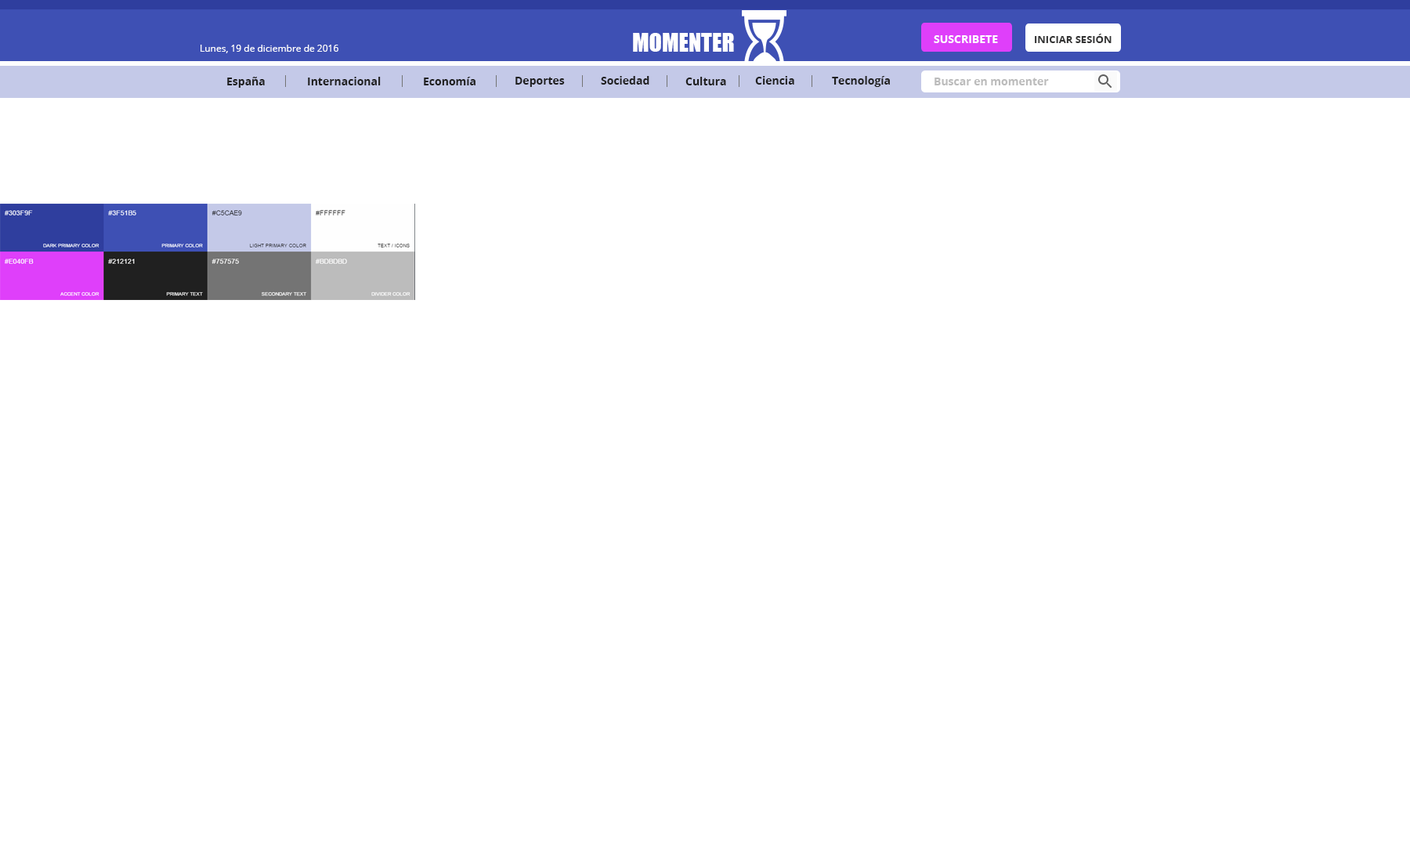
<style>
.page{position:relative;width:1410px;height:846px;background:#ffffff}
.page>*{position:absolute;margin:0}
.t1{font:23.5px "Impact";color:#ffffff}
.t2{font:11px "OpenSans-Bold";color:#ffffff}
.t3{font:10.2px "OpenSans-Bold";color:#333333}
.t4{font:9.4px "OpenSans";color:#ffffff}
.t5{font:11px "OpenSans-Bold";color:#202020}
.t6{font:11px "OpenSans-Bold";color:#bcbcbc}
</style>
<div class="page">
<p class="t1" style="left:633px;top:33px;width:101px;height:19px">MOMENTER</p>
<p class="t2" style="left:934px;top:35px;width:64px;height:8px">SUSCRIBETE</p>
<p class="t3" style="left:1035px;top:34px;width:76px;height:9px">INICIAR SESIÓN</p>
<p class="t4" style="left:200px;top:45px;width:138px;height:8px">Lunes, 19 de diciembre de 2016</p>
<p class="t5" style="left:227px;top:77px;width:38px;height:11px">España</p>
<p class="t5" style="left:308px;top:77px;width:73px;height:8px">Internacional</p>
<p class="t5" style="left:424px;top:77px;width:51px;height:8px">Economía</p>
<p class="t5" style="left:515px;top:77px;width:50px;height:10px">Deportes</p>
<p class="t5" style="left:601px;top:76px;width:48px;height:9px">Sociedad</p>
<p class="t5" style="left:685px;top:77px;width:41px;height:8px">Cultura</p>
<p class="t5" style="left:755px;top:76px;width:39px;height:9px">Ciencia</p>
<p class="t5" style="left:832px;top:76px;width:58px;height:11px">Tecnología</p>
<p class="t6" style="left:934px;top:78px;width:115px;height:7px">Buscar en momenter</p>
</div>
